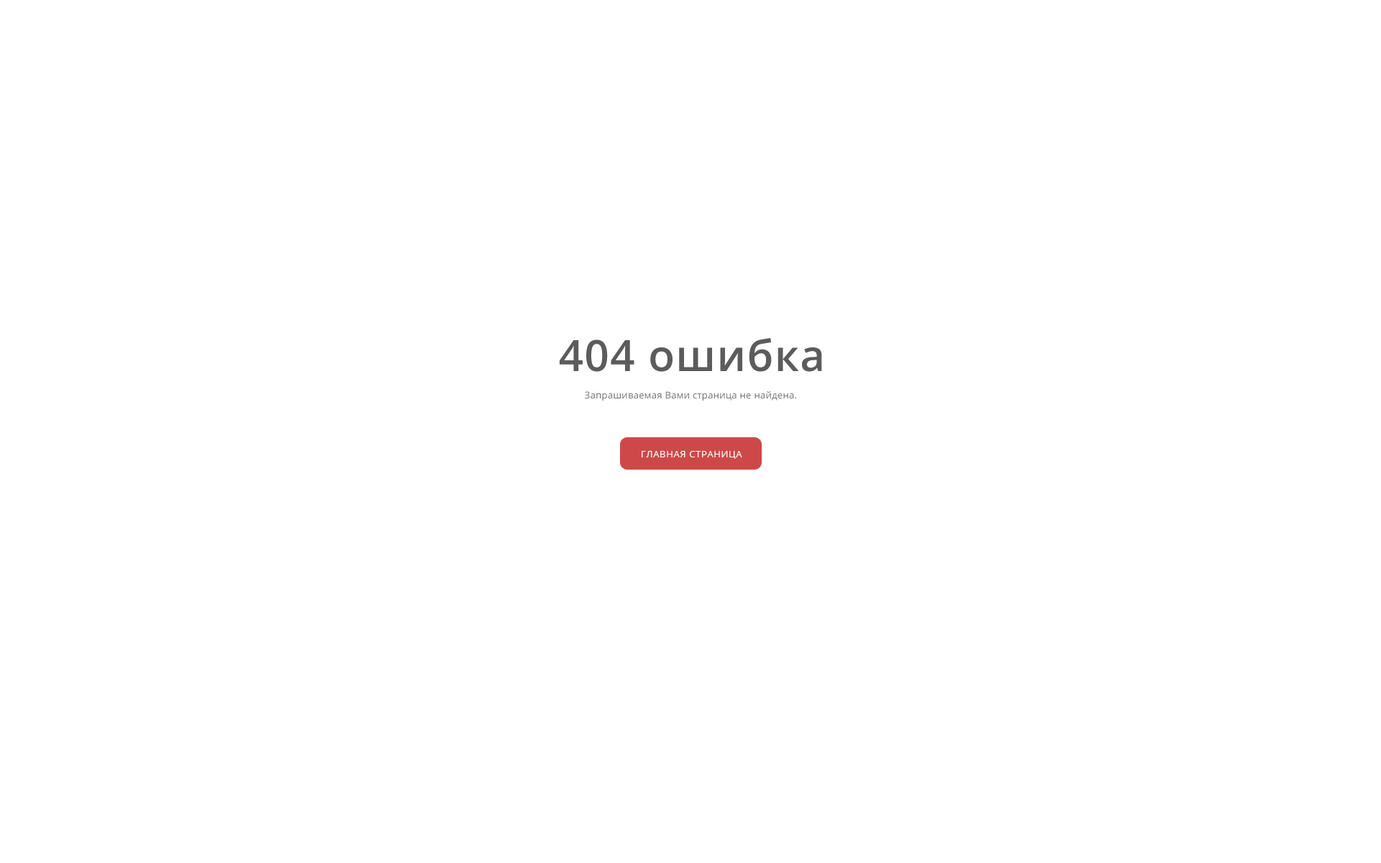
<style>
.page{position:relative;width:1381px;height:863px;background:#ffffff}
.page>*{position:absolute;margin:0}
.t1{font:43.2px "OpenSans-Semibold";letter-spacing:0.025em;color:#5c5c5c}
.t2{font:9.4px "OpenSans";letter-spacing:0.025em;color:#787878}
.t3{font:9.4px "OpenSans";letter-spacing:0.05em;color:#ffffff;text-transform:uppercase}
</style>
<div class="page">
<p class="t1" style="left:560px;top:338px;width:262px;height:34px">404 ошибка</p>
<p class="t2" style="left:585px;top:391px;width:211px;height:10px">Запрашиваемая Вами страница не найдена.</p>
<p class="t3" style="left:642px;top:451px;width:100px;height:8px">главная страница</p>
</div>
